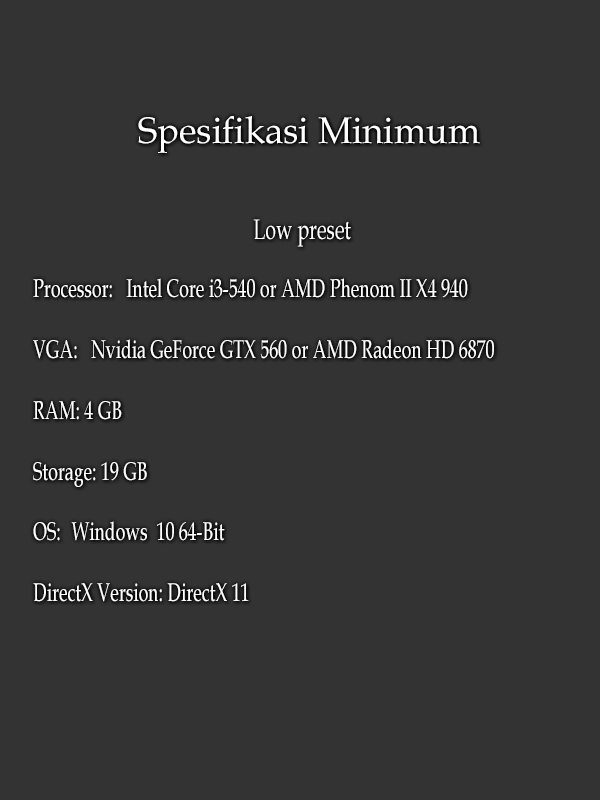
<style>
.page{position:relative;width:600px;height:800px;background:#333333}
.page>*{position:absolute;margin:0}
.t1{font:37.3px "BookAntiqua";color:#ffffff;scale:0.97 1}
.t2{font:25.4px "BookAntiqua";color:#ffffff;scale:0.7 1}
.t3{font:22.6px "BookAntiqua";color:#ffffff;scale:0.7 1}
.t4{font:28.2px "BookAntiqua";color:#ffffff;scale:0.7 1}
</style>
<div class="page">
<p class="t1" style="left:138px;top:116px;width:342px;height:37px">Spesifikasi Minimum</p>
<p class="t2" style="left:33px;top:219px;width:461px;height:383px;text-align:center"><span class="t3"><br></span><span class="t4">Low preset<br><br></span>Processor:   Intel Core i3-540 or AMD Phenom II X4 940<br><br>VGA:   Nvidia GeForce GTX 560 or AMD Radeon HD 6870<br><br>RAM: 4 GB<br><br>Storage: 19 GB<br><br>OS:   Windows  10 64-Bit<br><br>DirectX Version: DirectX 11</p>
</div>
